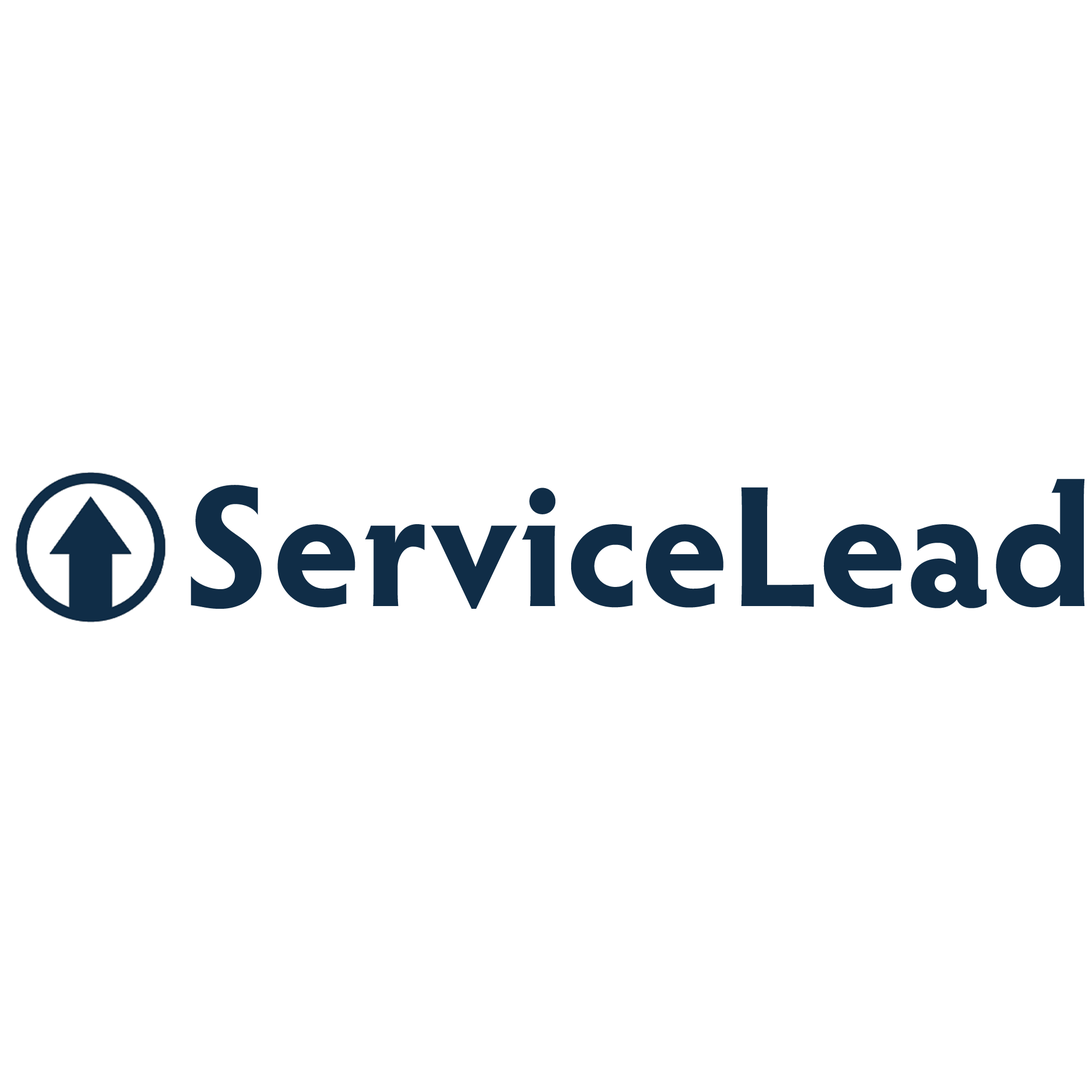
<style>
.page{position:relative;width:1092px;height:1092px;background:#ffffff}
.page>*{position:absolute;margin:0}
.t1{font:172.9px "HypatiaSansPro-Bold";color:#102d47}
</style>
<div class="page">
<p class="t1" style="left:191px;top:479px;width:894px;height:130px">ServiceLead</p>
</div>
